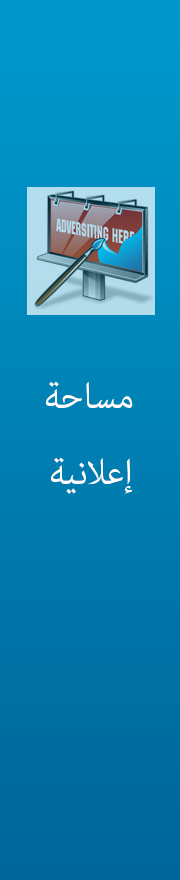
<style>
.page{position:relative;width:180px;height:880px}
.page>*{position:absolute;margin:0}
.t1{font:50px "AdobeArabic-Regular";color:#fdfdfb}
.t2{font:50px "AdobeArabic-Regular";color:#fdfdfd}
</style>
<div class="page">
<p class="t1" style="left:46px;top:381px;width:87px;height:27px">مساحة</p>
<p class="t2" style="left:51px;top:457px;width:82px;height:37px">إعلانية</p>
</div>
